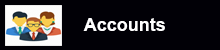
<style>
.page{position:relative;width:220px;height:50px;background:#010006}
.page>*{position:absolute;margin:0}
.t1{font:18px "Arial-BoldMT";color:#ffffff}
</style>
<div class="page">
<p class="t1" style="left:83px;top:18px;width:82px;height:13px">Accounts</p>
</div>
